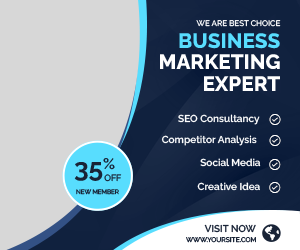
<style>
.page{position:relative;width:300px;height:250px;background:#d7d7d7}
.page>*{position:absolute;margin:0}
.t1{font:7.9px "Raleway-Medium";color:#ffffff}
.t2{font:20.6px "Raleway-ExtraBold";color:#58ddfe}
.t3{font:20.6px "Raleway-ExtraBold";color:#ffffff}
.t4{font:10px "Raleway-SemiBold";color:#ffffff}
.t5{font:26.3px "Raleway-Bold";color:#192437}
.t6{font:9px "Raleway-Medium"}
.t7{font:6.2px "Raleway-Medium";color:#192437}
.t8{font:9.8px "Raleway-SemiBold";color:#192437}
.t9{font:6.7px "Raleway-Medium";color:#192437}
</style>
<div class="page">
<p class="t1" style="left:196px;top:20px;width:85px;height:7px">WE ARE BEST CHOICE</p>
<p class="t2" style="left:179px;top:33px;width:101px;height:16px">BUSINESS</p>
<p class="t3" style="left:160px;top:54px;width:120px;height:15px">MARKETING</p>
<p class="t3" style="left:204px;top:76px;width:76px;height:15px">EXPERT</p>
<p class="t4" style="left:178px;top:114px;width:82px;height:11px">SEO Consultancy</p>
<p class="t4" style="left:161px;top:135px;width:96px;height:11px">Competitor Analysis</p>
<p class="t5" style="left:74px;top:158px;width:41px;height:23px">35%</p>
<p class="t4" style="left:200px;top:158px;width:61px;height:9px">Social Media</p>
<p class="t6" style="left:104px;top:174px;width:18px;height:8px">OFF</p>
<p class="t4" style="left:197px;top:182px;width:63px;height:9px">Creative Idea</p>
<p class="t7" style="left:76px;top:189px;width:43px;height:6px">NEW MEMBER</p>
<p class="t8" style="left:204px;top:224px;width:52px;height:9px">VISIT NOW</p>
<p class="t9" style="left:186px;top:237px;width:70px;height:6px">WWW.YOURSITE.COM</p>
</div>
